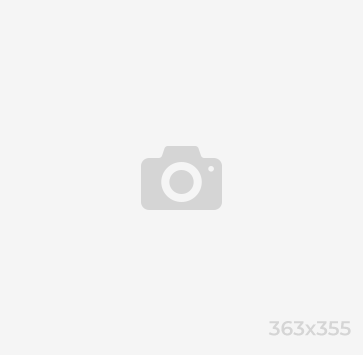
<style>
.page{position:relative;width:363px;height:355px;background:#f5f5f5}
.page>*{position:absolute;margin:0}
.t1{font:20px "Montserrat-SemiBold";color:#d5d5d5}
</style>
<div class="page">
<p class="t1" style="left:268px;top:321px;width:83px;height:15px">363x355</p>
</div>
